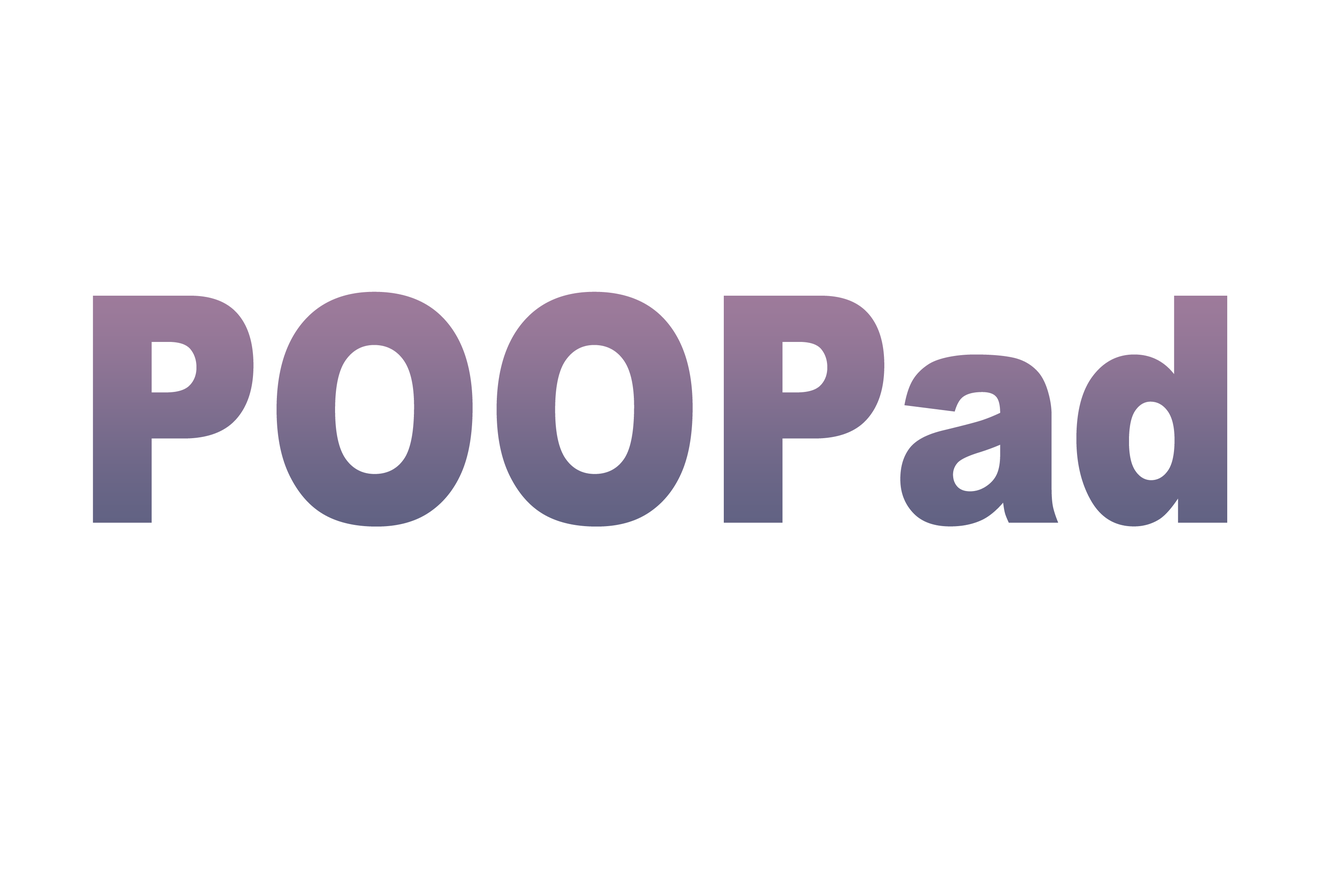
<style>
.page{position:relative;width:1337px;height:892px;background:#ffffff}
.page>*{position:absolute;margin:0}
.t1{font:316.9px "Arial-Black";scale:0.83 1}
</style>
<div class="page">
<p class="t1" style="left:93px;top:291px;width:1135px;height:235px">POOPad</p>
</div>
